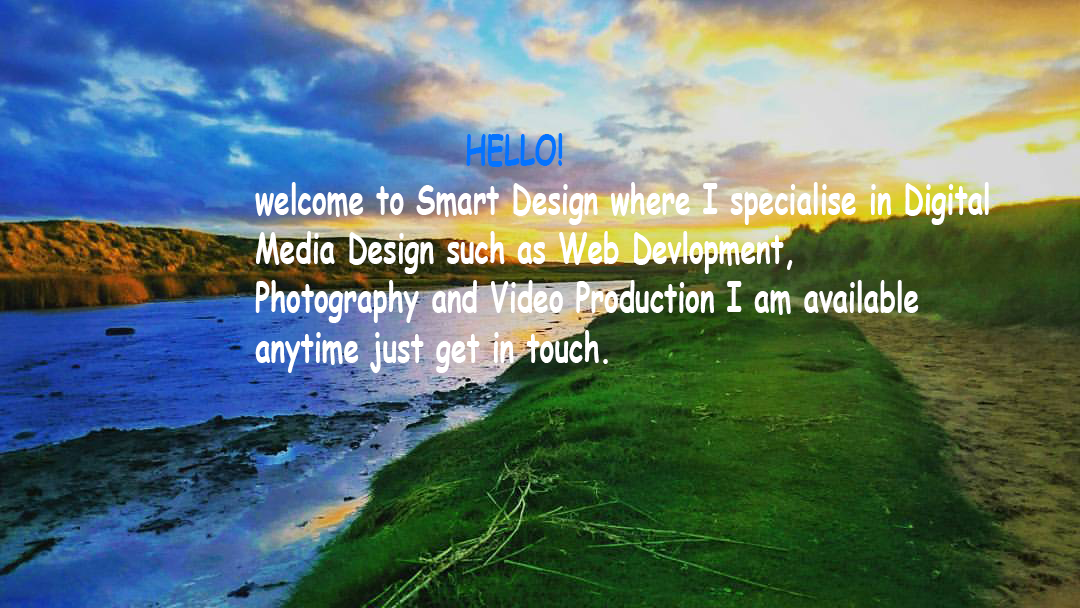
<style>
.page{position:relative;width:1080px;height:608px}
.page>*{position:absolute;margin:0}
.t1{font:41px "ComicSansMS-Bold";color:#ffffff;scale:0.68 1}
.t2{font:41px "ComicSansMS-Bold";color:#0373fe;scale:0.68 1}
</style>
<div class="page">
<p class="t1" style="left:255px;top:133px;width:734px;height:240px"><span class="t2">     HELLO!<br></span>welcome to Smart Design where I specialise in Digital<br>Media Design such as Web Devlopment,<br>Photography and Video Production I am available <br>anytime just get in touch.</p>
</div>
